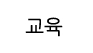
<style>
.page{position:relative;width:93px;height:53px;background:#ffffff}
.page>*{position:absolute;margin:0}
.t1{font:19.9px "NanumGothic";color:#000000}
</style>
<div class="page">
<p class="t1" style="left:25px;top:17px;width:38px;height:20px">교육</p>
</div>
